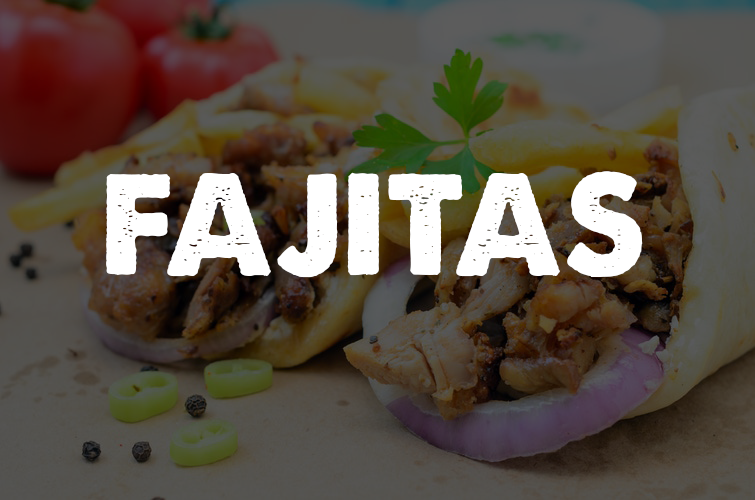
<style>
.page{position:relative;width:755px;height:500px}
.page>*{position:absolute;margin:0}
.t1{font:136px "ALoveofThunder";color:#ffffff}
</style>
<div class="page">
<p class="t1" style="left:106px;top:171px;width:537px;height:107px">FAJITAS</p>
</div>
